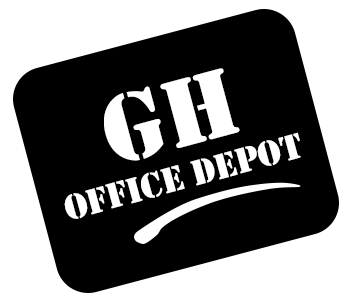
<style>
.page{position:relative;width:350px;height:300px;background:#000000}
.page>*{position:absolute;margin:0}
.t1{font:99.3px "Stencil";color:#ffffff}
.t2{font:36.8px "Stencil";color:#ffffff}
</style>
<div class="page">
<p class="t1" style="left:104px;top:68px;width:136px;height:93px;rotate:-15deg">GH</p>
<p class="t2" style="left:64px;top:132px;width:237px;height:87px;rotate:-15deg">Office depot</p>
</div>
